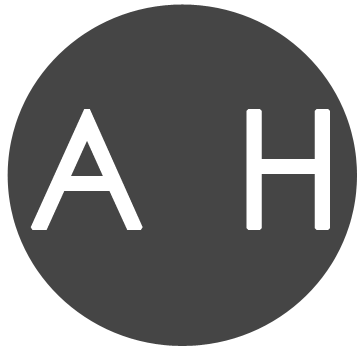
<style>
.page{position:relative;width:362px;height:353px;background:#454545}
.page>*{position:absolute;margin:0}
.t1{font:162.7px "CenturyGothic";letter-spacing:0.56em;color:#ffffff;font-weight:bold;scale:0.96 1}
</style>
<div class="page">
<p class="t1" style="left:30px;top:109px;width:300px;height:121px">AH</p>
</div>
